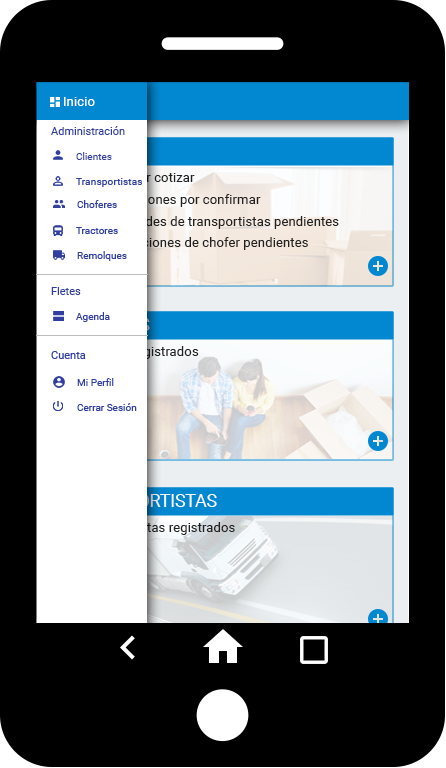
<style>
.page{position:relative;width:446px;height:768px;background:#000000}
.page>*{position:absolute;margin:0}
.t1{font:13.3px "Roboto-Regular";color:#ffffff}
.t2{font:10.7px "Roboto-Regular";color:#303f9f;scale:1.03 1}
.t3{font:10px "Roboto-Regular";color:#303f9f}
.t4{font:13.3px "Roboto-Regular"}
.t5{font:10px "Roboto-Regular";color:#303f9f;scale:1.03 1}
.t6{font:13.3px "Roboto-Regular";color:#212121}
.t7{font:17.8px "Roboto-Regular";color:#fffefe}
</style>
<div class="page">
<p class="t1" style="left:64px;top:97px;width:31px;height:9px">Inicio</p>
<p class="t2" style="left:51px;top:126px;width:74px;height:9px">Administración</p>
<p class="t3" style="left:76px;top:152px;width:36px;height:8px">Clientes</p>
<p class="t4" style="left:92px;top:172px;width:103px;height:13px">1 flete por cotizar</p>
<p class="t5" style="left:76px;top:178px;width:66px;height:9px">Transportistas</p>
<p class="t4" style="left:91px;top:194px;width:170px;height:13px">2 cotizaciones por confirmar</p>
<p class="t3" style="left:77px;top:200px;width:40px;height:8px">Choferes</p>
<p class="t6" style="left:92px;top:216px;width:247px;height:13px">3 solicitudes de transportistas pendientes</p>
<p class="t3" style="left:76px;top:227px;width:42px;height:7px">Tractores</p>
<p class="t6" style="left:92px;top:237px;width:216px;height:13px">4 asignaciones de chofer pendientes</p>
<p class="t3" style="left:77px;top:251px;width:50px;height:10px">Remolques</p>
<p class="t2" style="left:51px;top:287px;width:30px;height:8px">Fletes</p>
<p class="t3" style="left:76px;top:312px;width:34px;height:10px">Agenda</p>
<p class="t2" style="left:51px;top:351px;width:35px;height:8px">Cuenta</p>
<p class="t4" style="left:72px;top:346px;width:127px;height:13px">5 clientes registrados</p>
<p class="t3" style="left:77px;top:378px;width:37px;height:8px">Mi Perfil</p>
<p class="t3" style="left:77px;top:403px;width:60px;height:8px">Cerrar Sesión</p>
<p class="t7" style="left:71px;top:494px;width:146px;height:13px">TRANSPORTISTAS</p>
<p class="t4" style="left:72px;top:522px;width:163px;height:13px">6 transportistas registrados</p>
</div>
